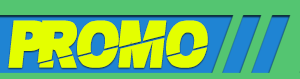
<style>
.page{position:relative;width:300px;height:79px;background:#54c571}
.page>*{position:absolute;margin:0}
.t1{font:67.3px "PaybAck";color:#e4ff00}
</style>
<div class="page">
<p class="t1" style="left:8px;top:20px;width:200px;height:48px">Promo</p>
</div>
